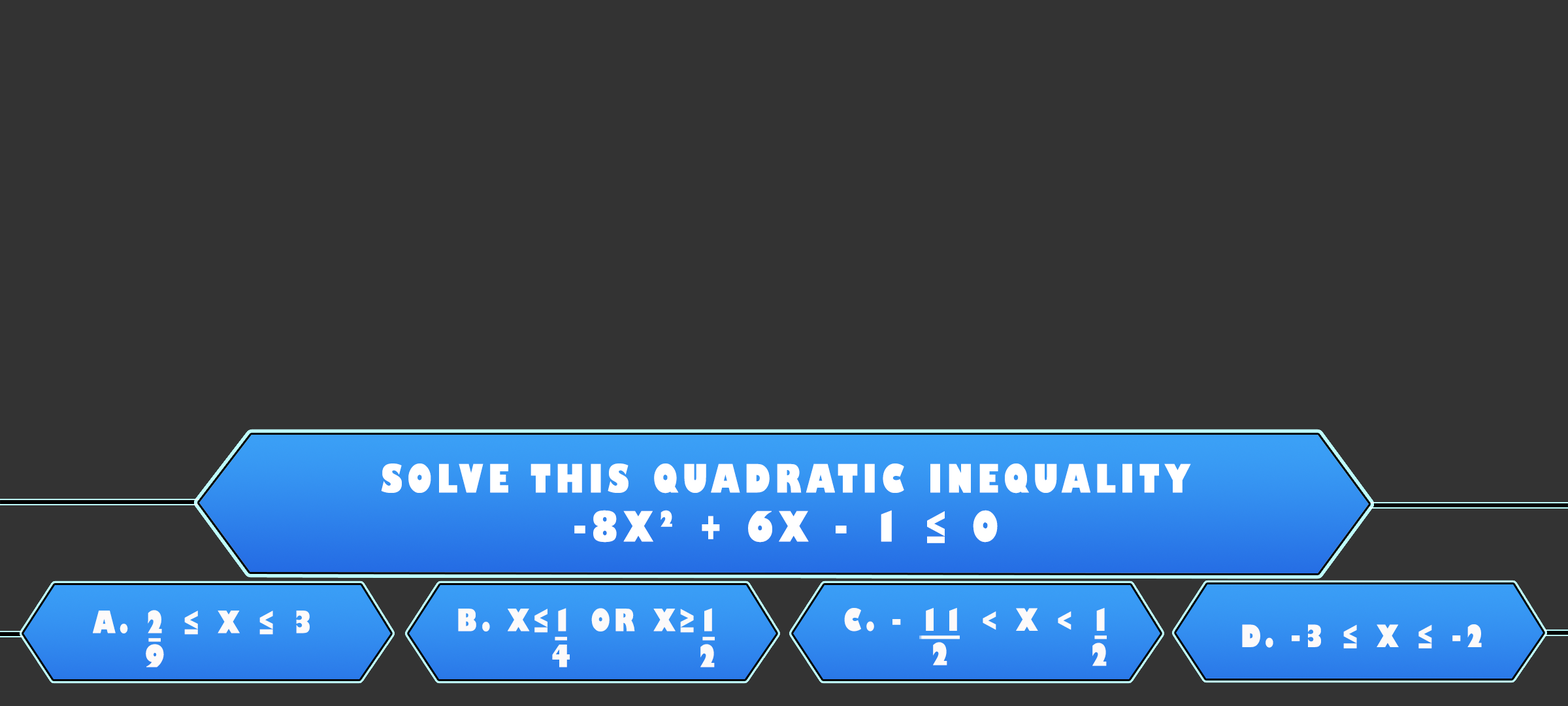
<style>
.page{position:relative;width:1568px;height:706px;background:#333333}
.page>*{position:absolute;margin:0}
.t1{font:38.1px/49px "GillSans-UltraBoldCondensed";letter-spacing:0.115em;color:#ffffff;text-transform:uppercase;scale:1.12 1}
.t2{font:40.8px/49px "GillSans-UltraBoldCondensed";letter-spacing:0.115em;color:#ffffff;text-transform:uppercase;scale:1.12 1}
.t3{font:29.9px "GillSans-UltraBoldCondensed";letter-spacing:0.115em;color:#fdfafa;text-transform:uppercase;scale:1.12 1}
.t4{font:29.9px "GillSans-UltraBoldCondensed";letter-spacing:0.115em;color:#fcfafa;text-transform:uppercase;scale:1.12 1}
</style>
<div class="page">
<p class="t1" style="left:381px;top:463px;width:810px;height:80px;text-align:center">solve this quadratic inequality<br><span class="t2">-8x² + 6x - 1 ≤ 0</span></p>
<p class="t3" style="left:93px;top:610px;width:217px;height:24px">a. 2 ≤ x ≤ 3</p>
<p class="t4" style="left:458px;top:608px;width:254px;height:24px">b. x≤1 or x≥1</p>
<p class="t3" style="left:844px;top:608px;width:261px;height:23px">c. - 11 &lt; x &lt; 1</p>
<p class="t4" style="left:1242px;top:624px;width:240px;height:24px">d. -3 ≤ x ≤ -2</p>
<p class="t3" style="left:148px;top:638px;width:13px;height:4px">_</p>
<p class="t4" style="left:555px;top:636px;width:12px;height:4px">_</p>
<p class="t4" style="left:702px;top:636px;width:13px;height:4px">_</p>
<p class="t3" style="left:933px;top:642px;width:14px;height:23px">2</p>
<p class="t3" style="left:1094px;top:635px;width:13px;height:4px">_</p>
<p class="t3" style="left:146px;top:644px;width:18px;height:23px">9</p>
<p class="t4" style="left:552px;top:644px;width:18px;height:23px">4</p>
<p class="t4" style="left:700px;top:644px;width:15px;height:23px">2</p>
<p class="t3" style="left:1092px;top:642px;width:15px;height:24px">2</p>
</div>
